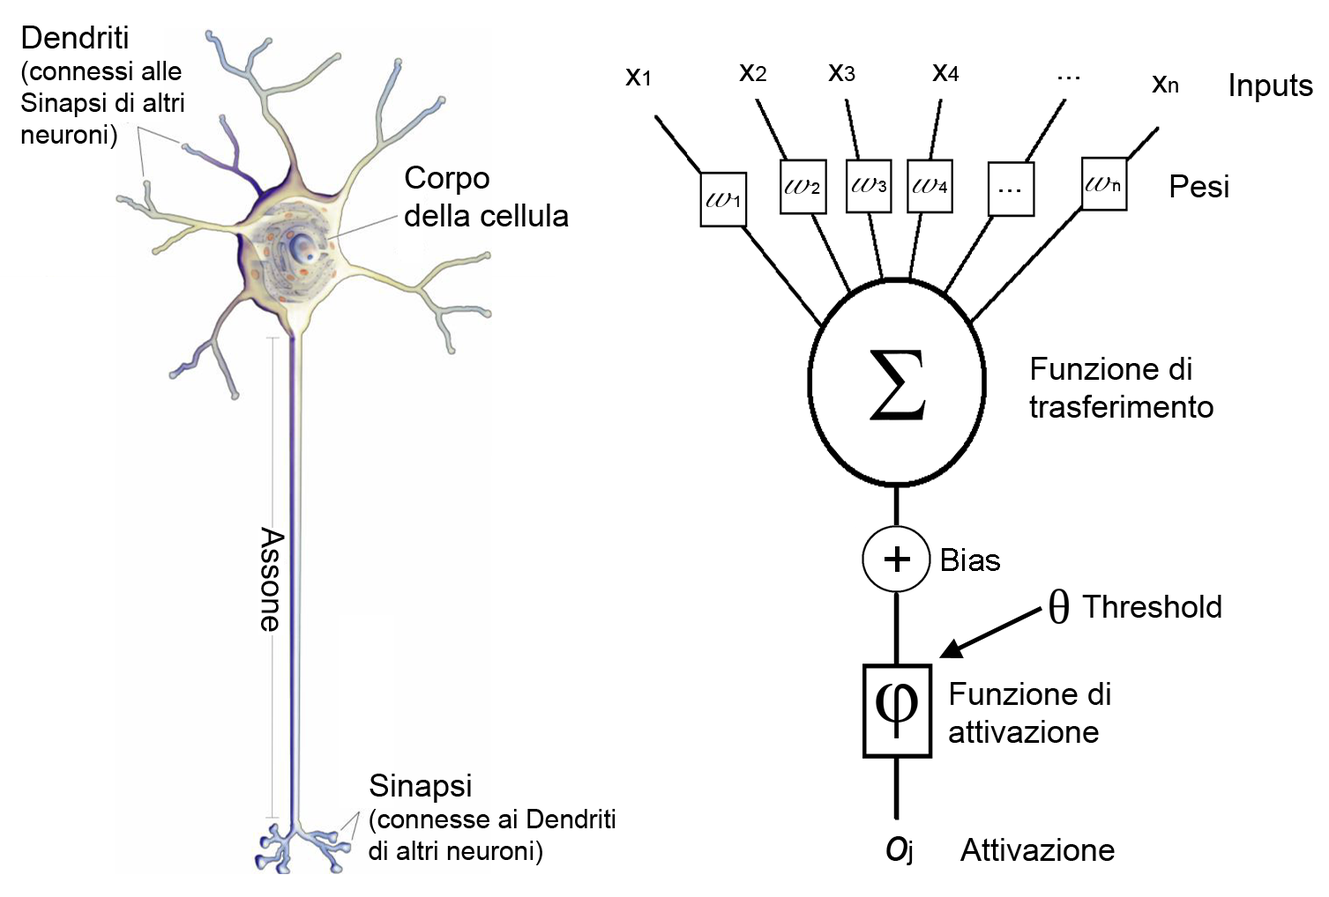
<style>
.page{position:relative;width:1329px;height:897px;background:#ffffff}
.page>*{position:absolute;margin:0}
.t1{font:26.4px "ArialMT";color:#000000}
.t2{font:31.7px "ArialMT";color:#000000}
.t3{font:21.2px "ArialMT";color:#000000}
.t4{font:39.7px "SnellRoundhand";color:#000000}
.t5{font:15.9px "ArialMT";color:#000000}
.t6{font:52.9px "ArialMT";color:#000000}
.t7{font:42.3px "Arial-ItalicMT";color:#000000}
</style>
<div class="page">
<p class="t1" style="left:21px;top:26px;width:163px;height:123px"><span class="t2">Dendriti <br></span>(connessi alle <br>Sinapsi di altri <br>neuroni)</p>
<p class="t2" style="left:739px;top:64px;width:27px;height:17px">x<span class="t3">2</span></p>
<p class="t2" style="left:828px;top:64px;width:27px;height:17px">x<span class="t3">3</span></p>
<p class="t2" style="left:932px;top:64px;width:27px;height:17px">x<span class="t3">4</span></p>
<p class="t2" style="left:625px;top:69px;width:25px;height:17px">x<span class="t3">1</span></p>
<p class="t2" style="left:1058px;top:77px;width:21px;height:2px">...</p>
<p class="t2" style="left:1151px;top:76px;width:27px;height:17px">x<span class="t3">n</span></p>
<p class="t2" style="left:1230px;top:73px;width:83px;height:29px">Inputs</p>
<p class="t2" style="left:405px;top:166px;width:164px;height:61px">Corpo <br>della cellula</p>
<p class="t4" style="left:784px;top:180px;width:36px;height:14px">w<span class="t5">2</span></p>
<p class="t4" style="left:851px;top:178px;width:35px;height:14px">w<span class="t5">3</span></p>
<p class="t4" style="left:912px;top:179px;width:35px;height:14px">w<span class="t5">4</span></p>
<p class="t4" style="left:1084px;top:177px;width:37px;height:14px">w<span class="t5">n</span></p>
<p class="t2" style="left:1170px;top:175px;width:58px;height:22px">Pesi</p>
<p class="t4" style="left:705px;top:193px;width:34px;height:14px">w<span class="t5">1</span></p>
<p class="t2" style="left:999px;top:190px;width:21px;height:2px">...</p>
<p class="t2" style="left:1029px;top:357px;width:184px;height:61px">Funzione di <br>trasferimento</p>
<p class="t2" style="left:261px;top:527px;width:24px;height:105px;rotate:90deg">Assone</p>
<p class="t6" style="left:884px;top:547px;width:26px;height:25px">+</p>
<p class="t2" style="left:942px;top:548px;width:58px;height:23px">Bias</p>
<p class="t2" style="left:1082px;top:595px;width:139px;height:23px">Threshold</p>
<p class="t2" style="left:949px;top:682px;width:161px;height:61px">Funzione di <br>attivazione</p>
<p class="t1" style="left:369px;top:774px;width:246px;height:92px"><span class="t2">Sinapsi <br></span>(connesse ai Dendriti <br>di altri neuroni)</p>
<p class="t7" style="left:886px;top:837px;width:26px;height:29px">o<span class="t1">j</span></p>
<p class="t2" style="left:960px;top:838px;width:154px;height:23px">Attivazione</p>
</div>
